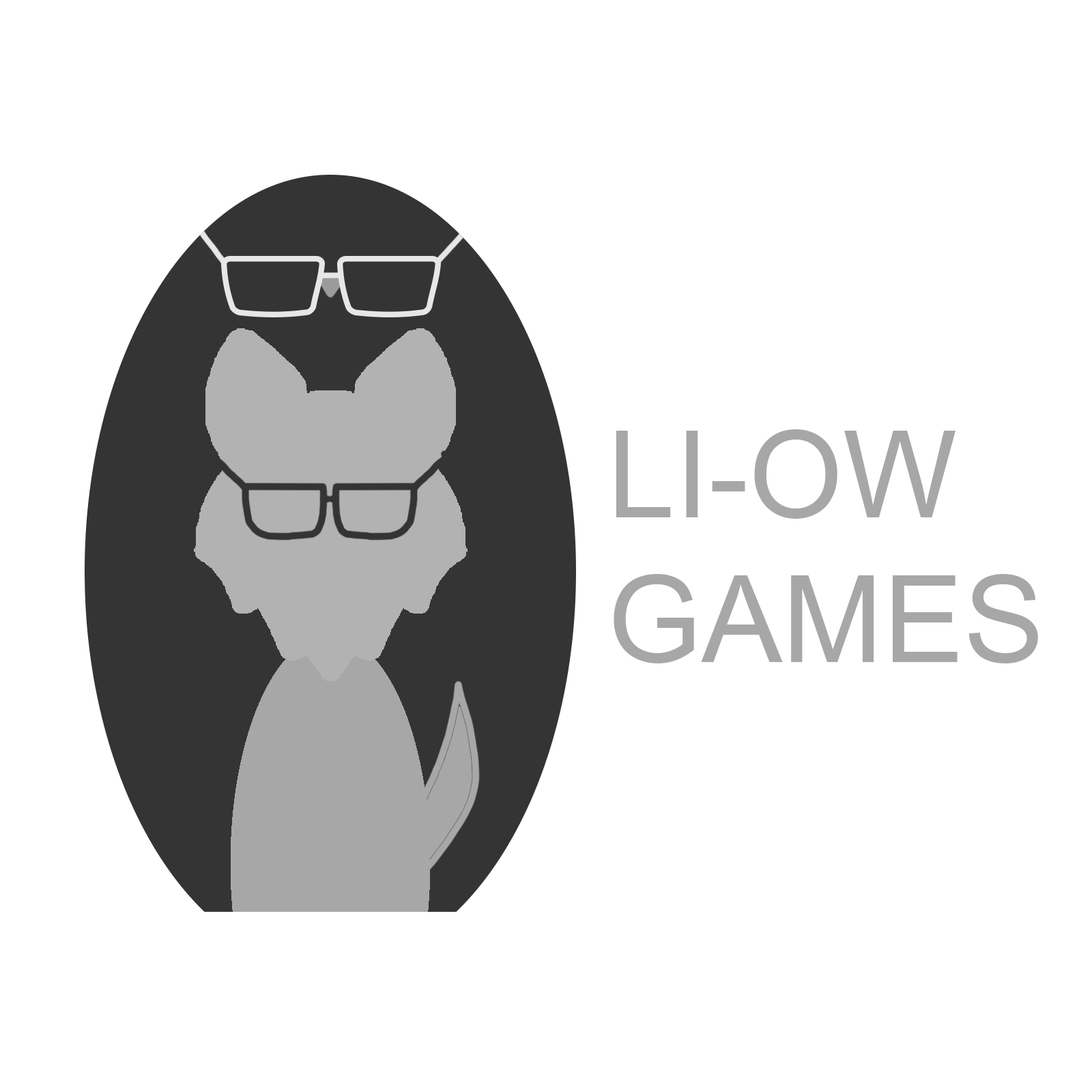
<style>
.page{position:relative;width:1092px;height:1092px;background:#ffffff}
.page>*{position:absolute;margin:0}
.t1{font:121.1px "ArialMT";color:#a7a7a7}
</style>
<div class="page">
<p class="t1" style="left:614px;top:429px;width:424px;height:234px">LI-OW<br>GAMES</p>
</div>
